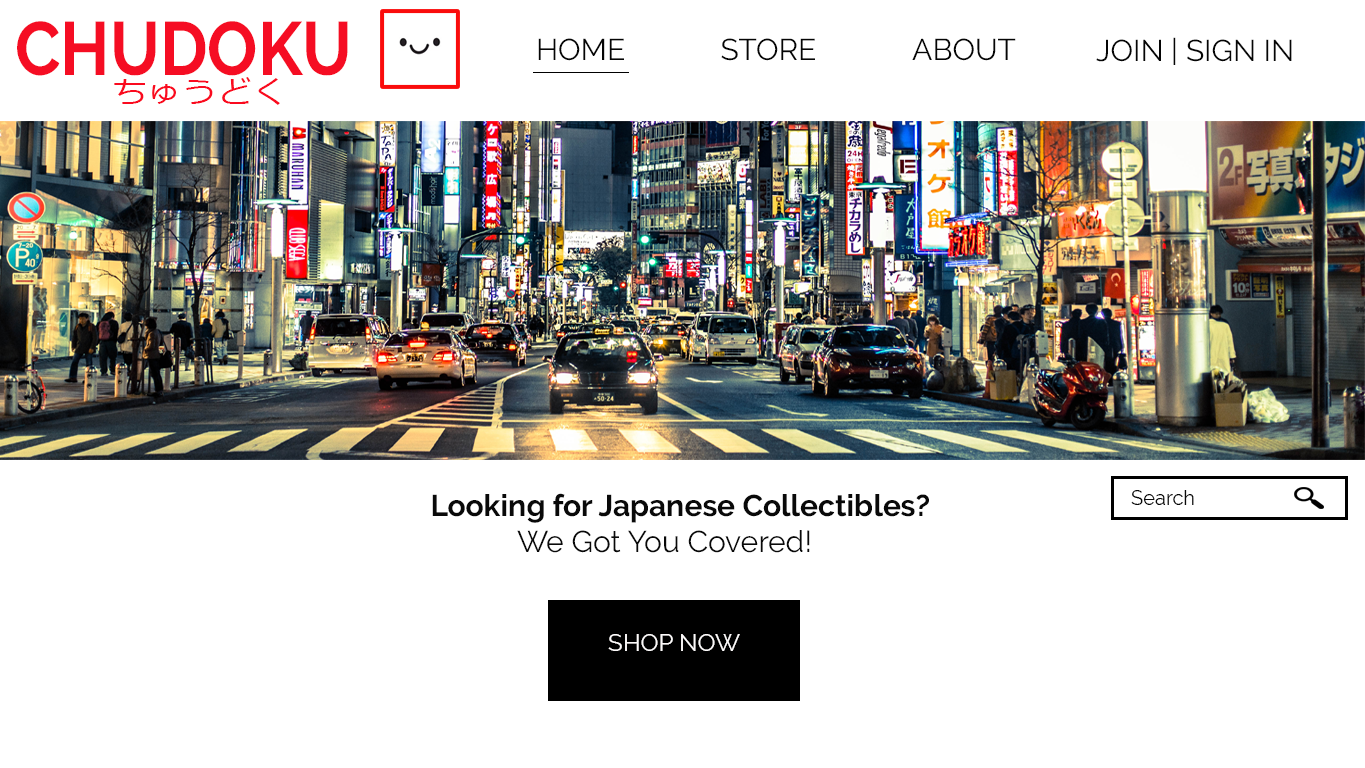
<style>
.page{position:relative;width:1365px;height:768px;background:#ffffff}
.page>*{position:absolute;margin:0}
.t1{font:75.2px "Raleway-Bold";color:#f50d23;scale:0.89 1}
.t2{font:30px "Raleway-Regular";color:#050505}
.t3{font:31.2px "Meiryo";color:#fa0a1f;scale:1.13 1}
.t4{font:30px "Raleway-Bold";color:#090909}
.t5{font:30px "Raleway-Regular";color:#090909}
.t6{font:20px "Raleway-Regular";color:#090909}
.t7{font:24px "Raleway-Regular";color:#fdfbfb}
</style>
<div class="page">
<p class="t1" style="left:17px;top:21px;width:331px;height:55px">CHUDOKU</p>
<p class="t2" style="left:538px;top:38px;width:86px;height:23px">HOME</p>
<p class="t2" style="left:721px;top:38px;width:94px;height:23px">STORE</p>
<p class="t2" style="left:912px;top:38px;width:104px;height:23px">ABOUT</p>
<p class="t2" style="left:1096px;top:37px;width:196px;height:28px">JOIN | SIGN IN</p>
<p class="t3" style="left:114px;top:77px;width:166px;height:28px">ちゅうどく</p>
<p class="t4" style="left:432px;top:493px;width:497px;height:60px">Looking for Japanese Collectibles?<br><span class="t5">    We Got You Covered!</span></p>
<p class="t6" style="left:1131px;top:490px;width:63px;height:15px">Search</p>
<p class="t7" style="left:608px;top:634px;width:132px;height:17px">SHOP NOW</p>
</div>
